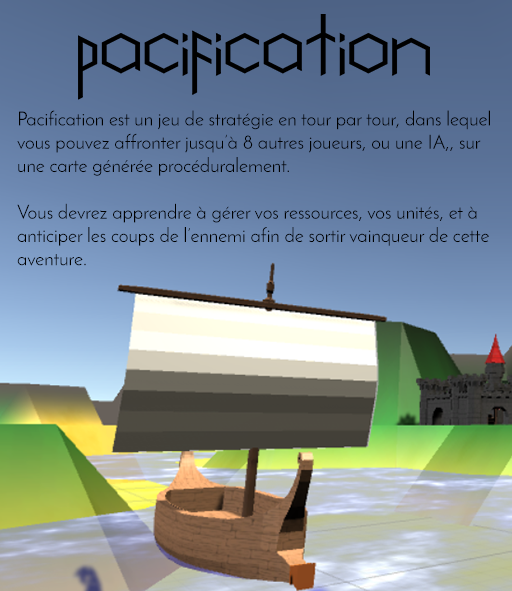
<style>
.page{position:relative;width:512px;height:591px}
.page>*{position:absolute;margin:0}
.t1{font:19.4px "JosefinSans";color:#000000}
</style>
<div class="page">
<p class="t1" style="left:17px;top:110px;width:473px;height:156px">Pacification est un jeu de stratégie en tour par tour, dans lequel <br>vous pouvez affronter jusqu’à 8 autres joueurs, ou une IA,, sur<br>une carte générée procéduralement.<br><br>Vous devrez apprendre à gérer vos ressources, vos unités, et à <br>anticiper les coups de l’ennemi afin de sortir vainqueur de cette <br>aventure.</p>
</div>
